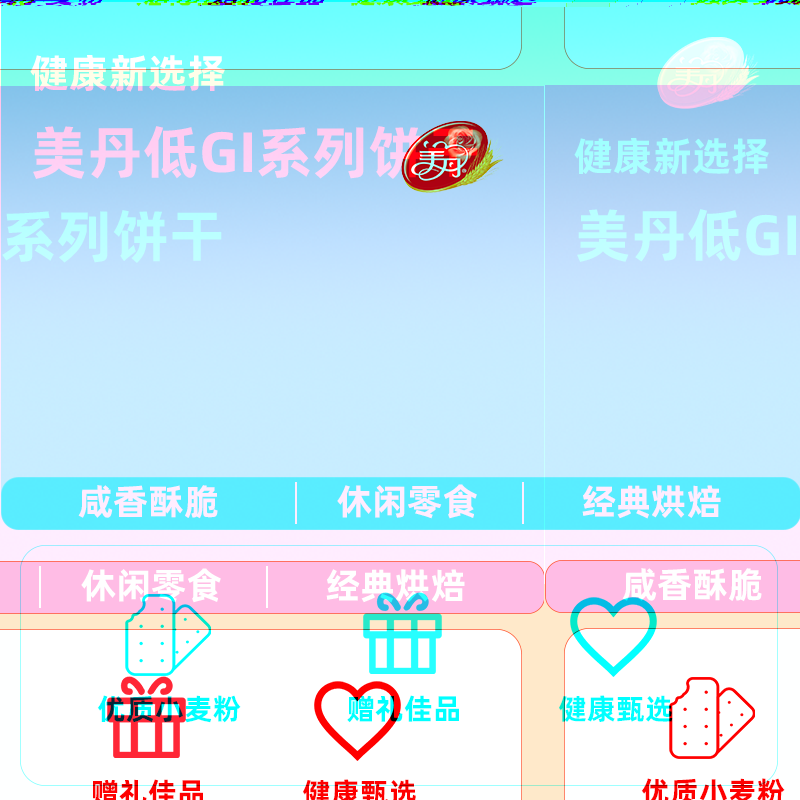
<style>
.page{position:relative;width:800px;height:800px}
.page>*{position:absolute;margin:0}
.t1{font:39.9px "AlibabaPuHuiTi-Bold";color:#ffffff}
.t2{font:57px "AlibabaPuHuiTi-Bold";color:#ffcef3}
.t3{font:36px "AlibabaPuHuiTi-Bold";color:#ffffff}
.t4{font:29.4px "AlibabaPuHuiTi-Bold"}
</style>
<div class="page">
<p class="t1" style="left:30px;top:53px;width:195px;height:37px">健康新选择</p>
<p class="t2" style="left:33px;top:124px;width:445px;height:53px">美丹低GI系列饼干</p>
<p class="t3" style="left:78px;top:483px;width:140px;height:34px">咸香酥脆</p>
<p class="t3" style="left:337px;top:482px;width:140px;height:35px">休闲零食</p>
<p class="t3" style="left:582px;top:483px;width:139px;height:34px">经典烘焙</p>
<p class="t4" style="left:97px;top:693px;width:144px;height:28px">优质小麦粉</p>
<p class="t4" style="left:347px;top:693px;width:112px;height:28px">赠礼佳品</p>
<p class="t4" style="left:559px;top:693px;width:114px;height:27px">健康甄选</p>
</div>
